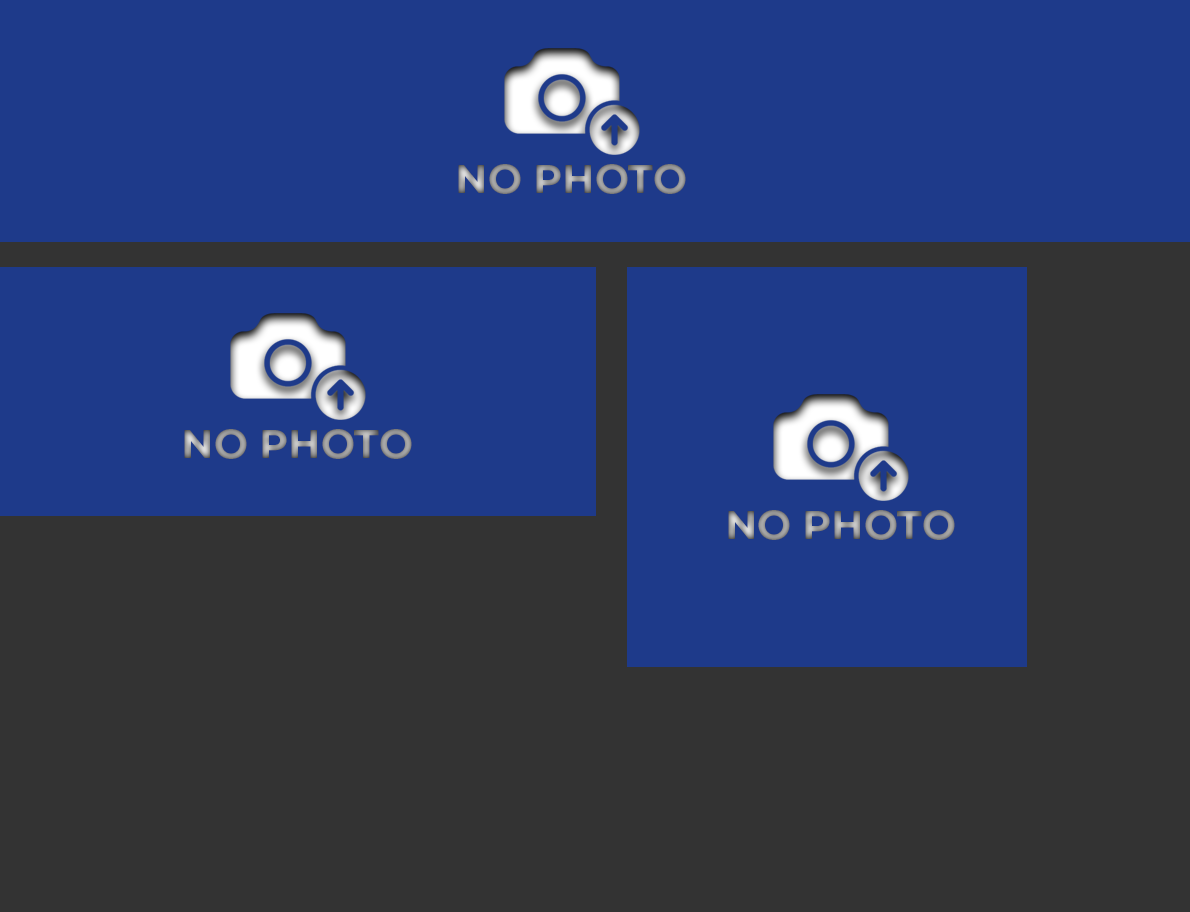
<style>
.page{position:relative;width:1190px;height:912px;background:#1e3a8a}
.page>*{position:absolute;margin:0}
.t1{font:69px "Montserrat-Bold";color:#999999}
</style>
<div class="page">
<p class="t1" style="left:458px;top:164px;width:228px;height:30px">NO PHOTO</p>
<p class="t1" style="left:184px;top:429px;width:228px;height:30px">NO PHOTO</p>
<p class="t1" style="left:728px;top:510px;width:227px;height:30px">NO PHOTO</p>
</div>
